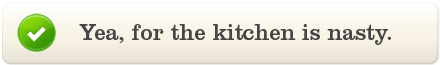
<style>
.page{position:relative;width:440px;height:65px}
.page>*{position:absolute;margin:0}
.t1{font:22.6px "ClarendonLTStd";letter-spacing:-0.005em;color:#464646}
</style>
<div class="page">
<p class="t1" style="left:79px;top:24px;width:312px;height:21px">Yea, for the kitchen is nasty.</p>
</div>
